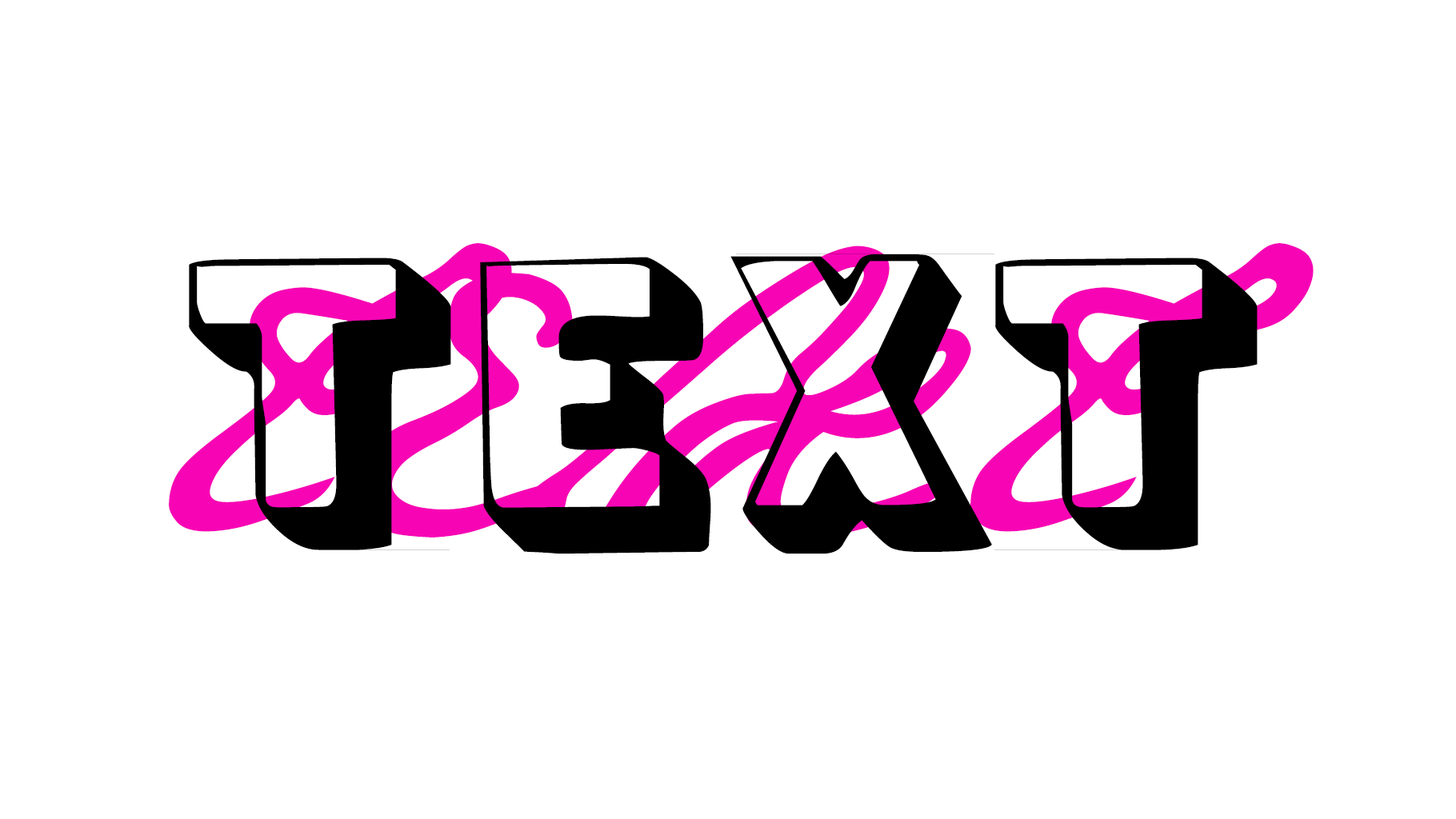
<style>
.page{position:relative;width:1456px;height:819px;background:#ffffff}
.page>*{position:absolute;margin:0}
.t1{font:320px "JaneAusten";color:#f705b5}
.t2{font:368px "Lunch";color:#000000;scale:1.2 1}
</style>
<div class="page">
<p class="t1" style="left:169px;top:243px;width:1144px;height:310px">TEXT</p>
<p class="t2" style="left:189px;top:254px;width:1068px;height:300px">TEXT</p>
</div>
